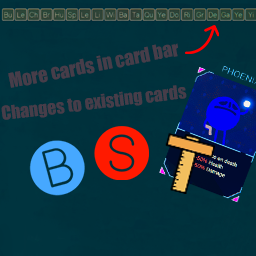
<style>
.page{position:relative;width:256px;height:256px;background:#00313c}
.page>*{position:absolute;margin:0}
.t1{font:18.8px "Impact";color:#473d49}
.t2{font:17.5px "Impact";color:#473d49}
</style>
<div class="page">
<p class="t1" style="left:8px;top:43px;width:170px;height:45px;rotate:-11deg">More cards in card bar</p>
<p class="t2" style="left:1px;top:85px;width:186px;height:35px;rotate:-7deg">Changes to existing cards</p>
</div>
